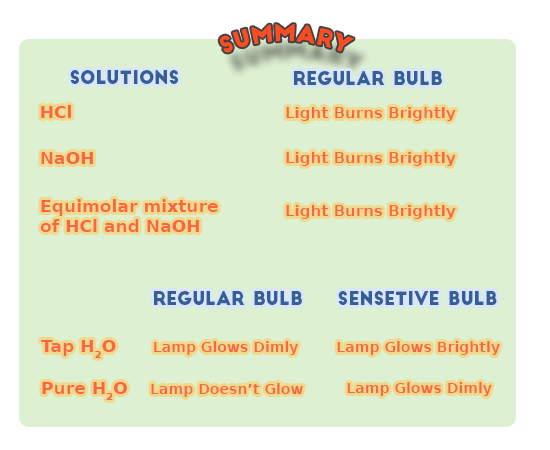
<style>
.page{position:relative;width:550px;height:450px;background:#def0d2}
.page>*{position:absolute;margin:0}
.t1{font:22px "BigJohn";color:#fb4c23}
.t2{font:18px "BigJohn";color:#375e97}
.t3{font:17px "DejaVuSans-Bold";color:#fb6542}
.t4{font:15px "DejaVuSans-Bold";color:#fb6542}
.t5{font:14px "DejaVuSans-Bold";color:#fb6542}
</style>
<div class="page">
<p class="t1" style="left:219px;top:24px;width:135px;height:29px">Summary</p>
<p class="t2" style="left:70px;top:70px;width:108px;height:14px">SolutionS</p>
<p class="t2" style="left:294px;top:71px;width:148px;height:14px">Regular Bulb</p>
<p class="t3" style="left:41px;top:105px;width:30px;height:13px">HCl</p>
<p class="t4" style="left:286px;top:107px;width:170px;height:14px">Light Burns Brightly</p>
<p class="t3" style="left:41px;top:152px;width:52px;height:12px">NaOH</p>
<p class="t4" style="left:286px;top:152px;width:170px;height:14px">Light Burns Brightly</p>
<p class="t3" style="left:40px;top:199px;width:178px;height:33px">Equimolar mixture <br>of HCl and NaOH</p>
<p class="t4" style="left:286px;top:205px;width:170px;height:14px">Light Burns Brightly</p>
<p class="t2" style="left:154px;top:291px;width:148px;height:14px">Regular Bulb</p>
<p class="t2" style="left:338px;top:291px;width:159px;height:14px">Sensetive Bulb</p>
<p class="t3" style="left:41px;top:340px;width:75px;height:18px">Tap H2O</p>
<p class="t5" style="left:154px;top:341px;width:144px;height:14px">Lamp Glows Dimly</p>
<p class="t5" style="left:337px;top:341px;width:163px;height:14px">Lamp Glows Brightly</p>
<p class="t3" style="left:42px;top:382px;width:85px;height:18px">Pure H2O</p>
<p class="t5" style="left:151px;top:383px;width:152px;height:14px">Lamp Doesn’t Glow</p>
<p class="t5" style="left:347px;top:382px;width:145px;height:14px">Lamp Glows Dimly</p>
</div>
